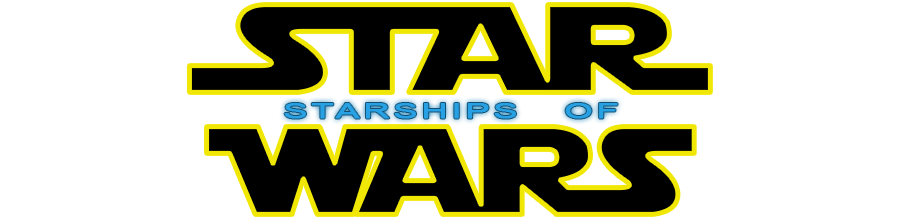
<style>
.page{position:relative;width:900px;height:220px;background:#ffffff}
.page>*{position:absolute;margin:0}
.t1{font:122.7px "StarJedi";letter-spacing:-0.04em;color:#000000;font-weight:bold;scale:1.43 1}
.t2{font:20px "ArialMT";letter-spacing:0.08em;color:#27a1e3;font-weight:bold;scale:1.82 1}
.t3{font:122.7px "StarJedi";letter-spacing:-0.04em;color:#000000;font-weight:bold;scale:1.28 1}
</style>
<div class="page">
<p class="t1" style="left:189px;top:4px;width:522px;height:89px">STAR</p>
<p class="t2" style="left:284px;top:103px;width:334px;height:16px">STARSHIPS   OF</p>
<p class="t3" style="left:206px;top:126px;width:489px;height:89px">WARS</p>
</div>
